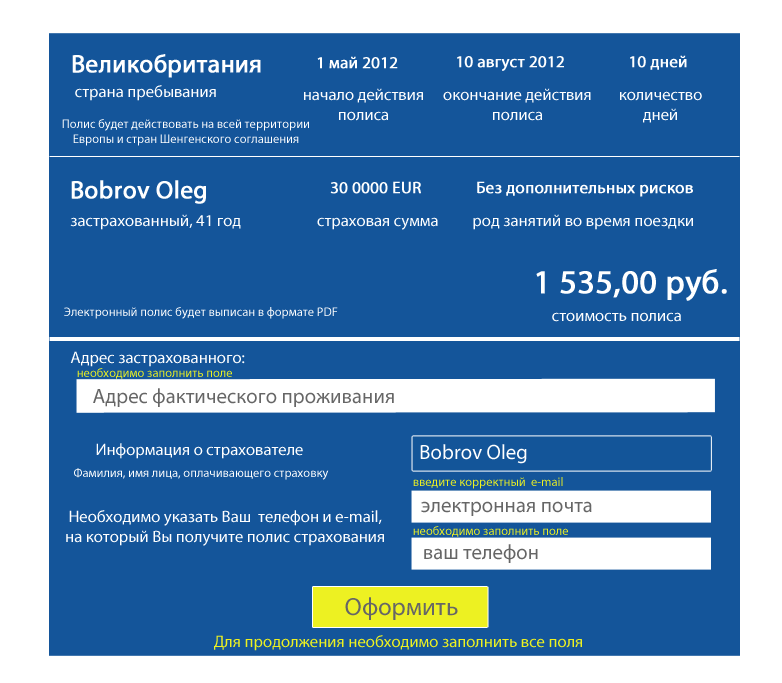
<style>
.page{position:relative;width:782px;height:683px;background:#14559a}
.page>*{position:absolute;margin:0}
.t1{font:25px "MyriadPro-Regular";color:#ffffff;font-weight:bold}
.t2{font:16.7px "MyriadPro-Regular";color:#ffffff;font-weight:bold}
.t3{font:16.7px "MyriadPro-Regular";color:#ffffff}
.t4{font:12.5px "MyriadPro-Regular";color:#ffffff}
.t5{font:33.3px "MyriadPro-Regular";color:#ffffff;font-weight:bold}
.t6{font:12.5px "MyriadPro-Regular";color:#edf121}
.t7{font:20.8px "MyriadPro-Regular";color:#666666}
.t8{font:20.8px "MyriadPro-Regular";color:#ffffff}
.t9{font:25px "MyriadPro-Regular";color:#666666}
.t10{font:16.7px "MyriadPro-Regular";color:#edf121}
</style>
<div class="page">
<p class="t1" style="left:72px;top:54px;width:189px;height:24px">Великобритания</p>
<p class="t2" style="left:317px;top:56px;width:81px;height:13px">1 май 2012</p>
<p class="t2" style="left:457px;top:56px;width:107px;height:15px">10 август 2012</p>
<p class="t2" style="left:630px;top:55px;width:57px;height:15px">10 дней</p>
<p class="t3" style="left:75px;top:85px;width:141px;height:16px">страна пребывания</p>
<p class="t3" style="left:304px;top:88px;width:119px;height:33px;text-align:center">начало действия полиса</p>
<p class="t3" style="left:443px;top:88px;width:148px;height:33px;text-align:center">окончание действия полиса</p>
<p class="t3" style="left:620px;top:91px;width:82px;height:32px;text-align:center">количество дней</p>
<p class="t4" style="left:62px;top:119px;width:247px;height:27px;text-align:center">Полис будет действовать на всей территории Европы и стран Шенгенского соглашения</p>
<p class="t1" style="left:71px;top:180px;width:135px;height:24px">Bobrov Oleg</p>
<p class="t2" style="left:330px;top:181px;width:91px;height:13px">30 0000 EUR</p>
<p class="t2" style="left:477px;top:181px;width:216px;height:16px">Без дополнительных рисков</p>
<p class="t3" style="left:70px;top:214px;width:171px;height:16px">застрахованный, 41 год</p>
<p class="t3" style="left:317px;top:217px;width:121px;height:13px">страховая сумма</p>
<p class="t3" style="left:473px;top:214px;width:220px;height:16px">род занятий во время поездки</p>
<p class="t5" style="left:536px;top:269px;width:191px;height:32px">1 535,00 руб.</p>
<p class="t4" style="left:64px;top:307px;width:274px;height:12px">Электронный полис будет выписан в формате PDF</p>
<p class="t3" style="left:552px;top:312px;width:129px;height:10px">стоимость полиса</p>
<p class="t3" style="left:70px;top:351px;width:175px;height:16px">Адрес застрахованного:</p>
<p class="t6" style="left:77px;top:368px;width:155px;height:11px">необходимо заполнить поле</p>
<p class="t7" style="left:93px;top:388px;width:301px;height:19px">Адрес фактического проживания</p>
<p class="t3" style="left:96px;top:443px;width:207px;height:16px">Информация о страхователе</p>
<p class="t8" style="left:420px;top:444px;width:107px;height:20px">Bobrov Oleg</p>
<p class="t4" style="left:74px;top:468px;width:255px;height:12px">Фамилия, имя лица, оплачивающего страховку</p>
<p class="t6" style="left:413px;top:477px;width:150px;height:12px">введите корректный  e-mail</p>
<p class="t3" style="left:66px;top:510px;width:318px;height:36px;text-align:center">Необходимо указать Ваш  телефон и e-mail, на который Вы получите полис страхования</p>
<p class="t7" style="left:421px;top:501px;width:171px;height:15px">электронная почта</p>
<p class="t6" style="left:413px;top:526px;width:155px;height:11px">необходимо заполнить поле</p>
<p class="t7" style="left:424px;top:544px;width:114px;height:19px">ваш телефон</p>
<p class="t9" style="left:345px;top:597px;width:113px;height:23px">Оформить</p>
<p class="t10" style="left:214px;top:635px;width:368px;height:16px">Для продолжения необходимо заполнить все поля</p>
</div>
